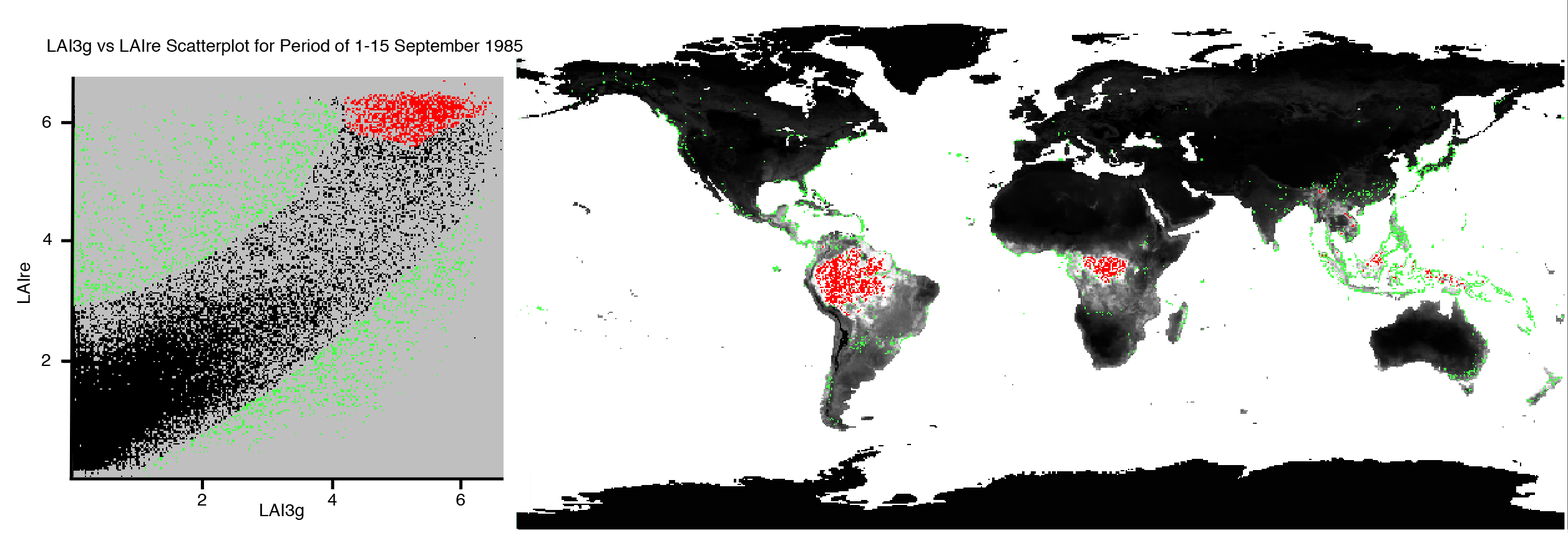
<style>
.page{position:relative;width:1568px;height:533px;background:#ffffff}
.page>*{position:absolute;margin:0}
.t1{font:17.5px "Helvetica";color:#000000}
</style>
<div class="page">
<p class="t1" style="left:47px;top:39px;width:476px;height:17px">LAI3g vs LAIre Scatterplot for Period of 1-15 September 1985</p>
</div>
